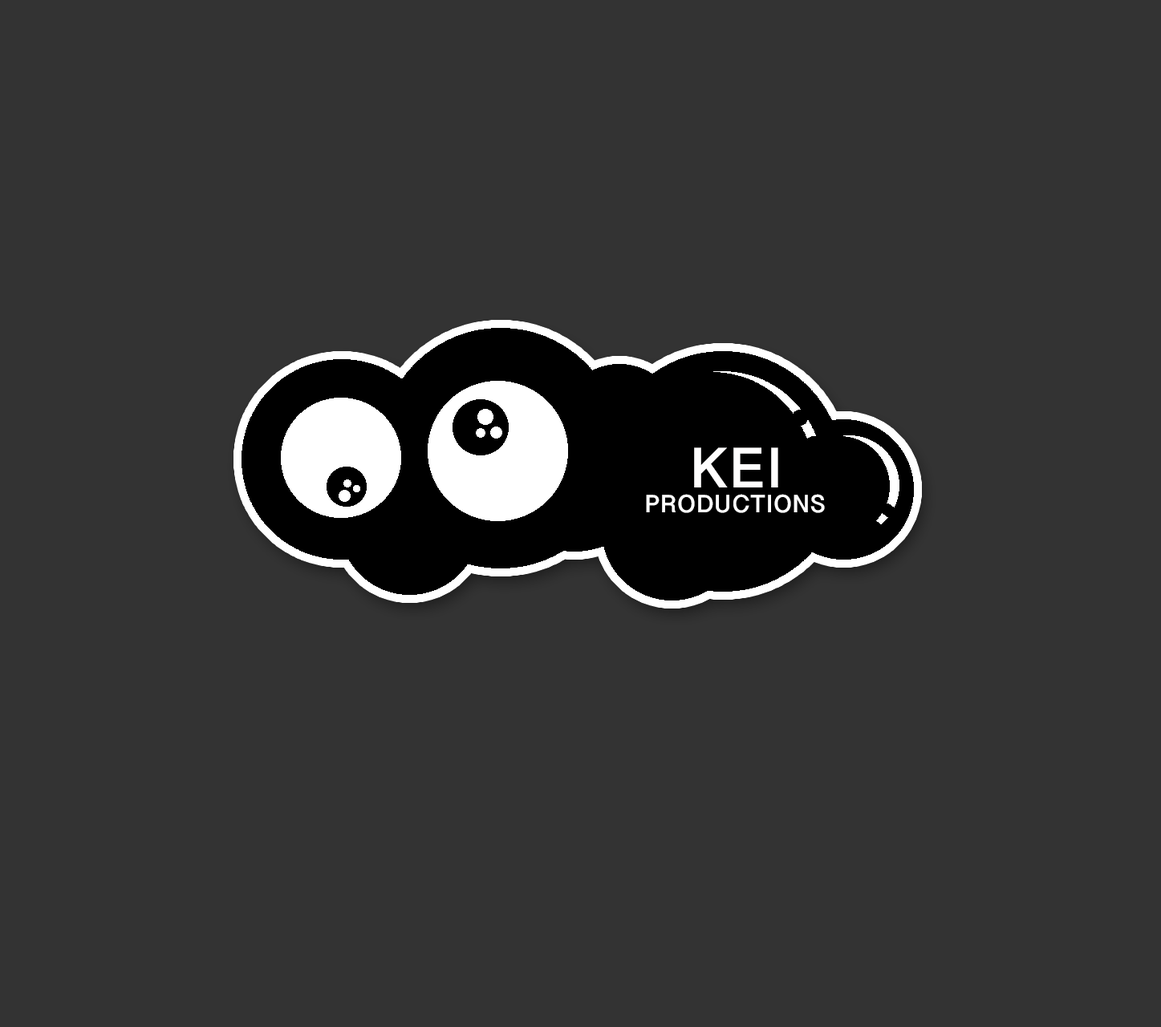
<style>
.page{position:relative;width:1161px;height:1027px;background:#333333}
.page>*{position:absolute;margin:0}
.t1{font:58.1px "SinhalaSangamMN-Bold";color:#fffefe}
.t2{font:25.6px "SinhalaSangamMN-Bold";color:#ffffff}
</style>
<div class="page">
<p class="t1" style="left:694px;top:448px;width:84px;height:40px">KEI</p>
<p class="t2" style="left:646px;top:494px;width:179px;height:19px">PRODUCTIONS</p>
</div>
